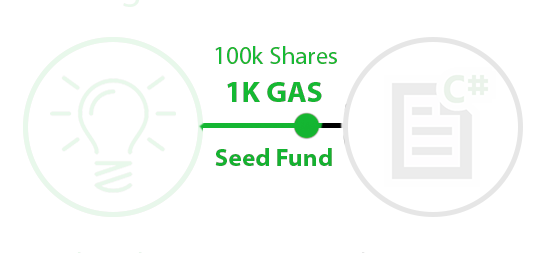
<style>
.page{position:relative;width:545px;height:253px;background:#ffffff}
.page>*{position:absolute;margin:0}
.t1{font:25px "MyriadPro-Regular";color:#15bc34}
.t2{font:29.8px "MyriadPro-Bold";color:#15b833}
.t3{font:25px "MyriadPro-Bold";color:#14b331}
</style>
<div class="page">
<p class="t1" style="left:215px;top:46px;width:122px;height:18px">100k Shares</p>
<p class="t2" style="left:227px;top:82px;width:95px;height:20px">1K GAS</p>
<p class="t3" style="left:215px;top:148px;width:117px;height:18px">Seed Fund</p>
</div>
